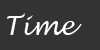
<style>
.page{position:relative;width:100px;height:50px;background:#333333}
.page>*{position:absolute;margin:0}
.t1{font:25.6px "LucidaHandwriting-Italic";color:#fefefe}
</style>
<div class="page">
<p class="t1" style="left:6px;top:13px;width:76px;height:22px">Time</p>
</div>
